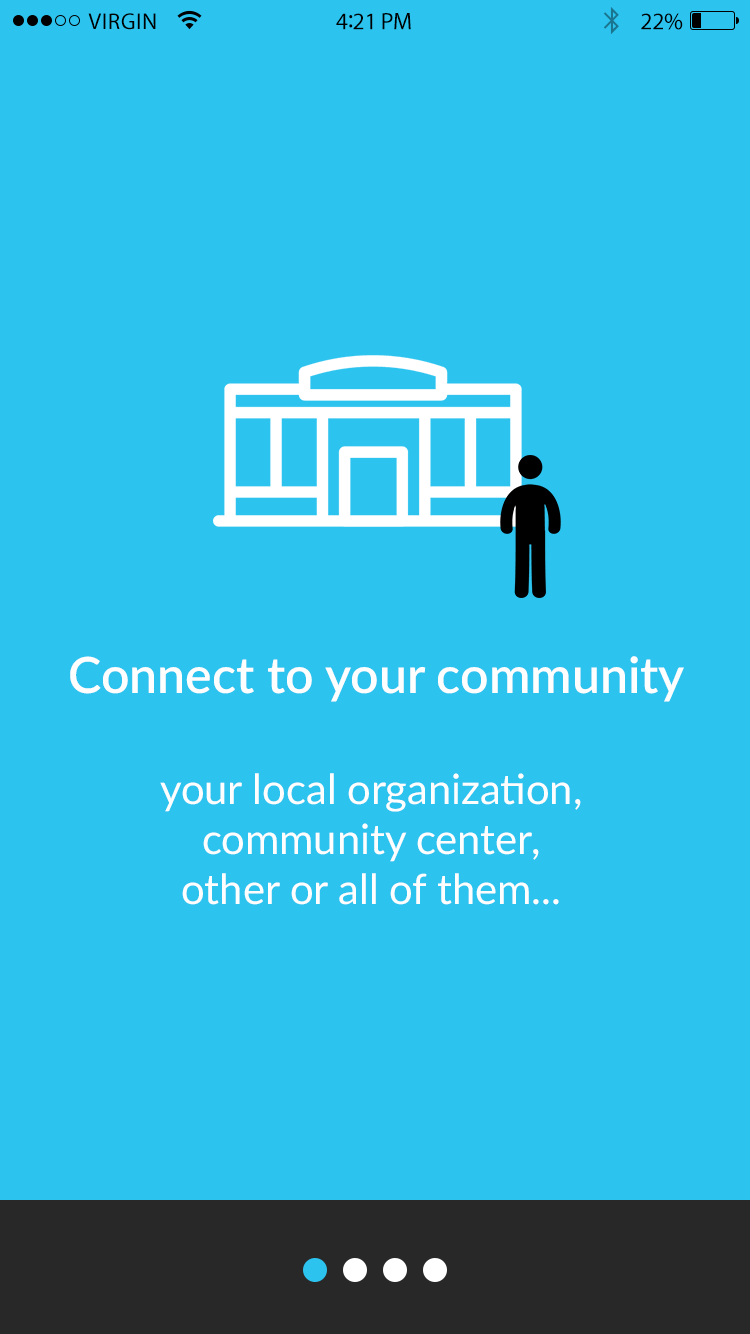
<style>
.page{position:relative;width:750px;height:1334px;background:#2cc3ef}
.page>*{position:absolute;margin:0}
.t1{font:23px "MyriadPro-Regular";letter-spacing:0.02em;color:#000000}
.t2{font:24px "MyriadPro-Regular";letter-spacing:-0.02em;color:#000000}
.t3{font:26px "MyriadPro-Regular";letter-spacing:-0.02em;color:#000000}
.t4{font:50px "Lato-Semibold";color:#fffefe}
.t5{font:41.7px "Lato-Regular";color:#fffefe}
</style>
<div class="page">
<p class="t1" style="left:88px;top:13px;width:68px;height:17px">VIRGIN</p>
<p class="t2" style="left:336px;top:13px;width:75px;height:17px">4<span class="t3">:</span>21 PM</p>
<p class="t2" style="left:641px;top:13px;width:42px;height:17px">22%</p>
<p class="t4" style="left:70px;top:656px;width:614px;height:46px">Connect to your community</p>
<p class="t5" style="left:160px;top:773px;width:421px;height:132px;text-align:center">your local organization, <br>community center, <br>other or all of them...</p>
</div>
